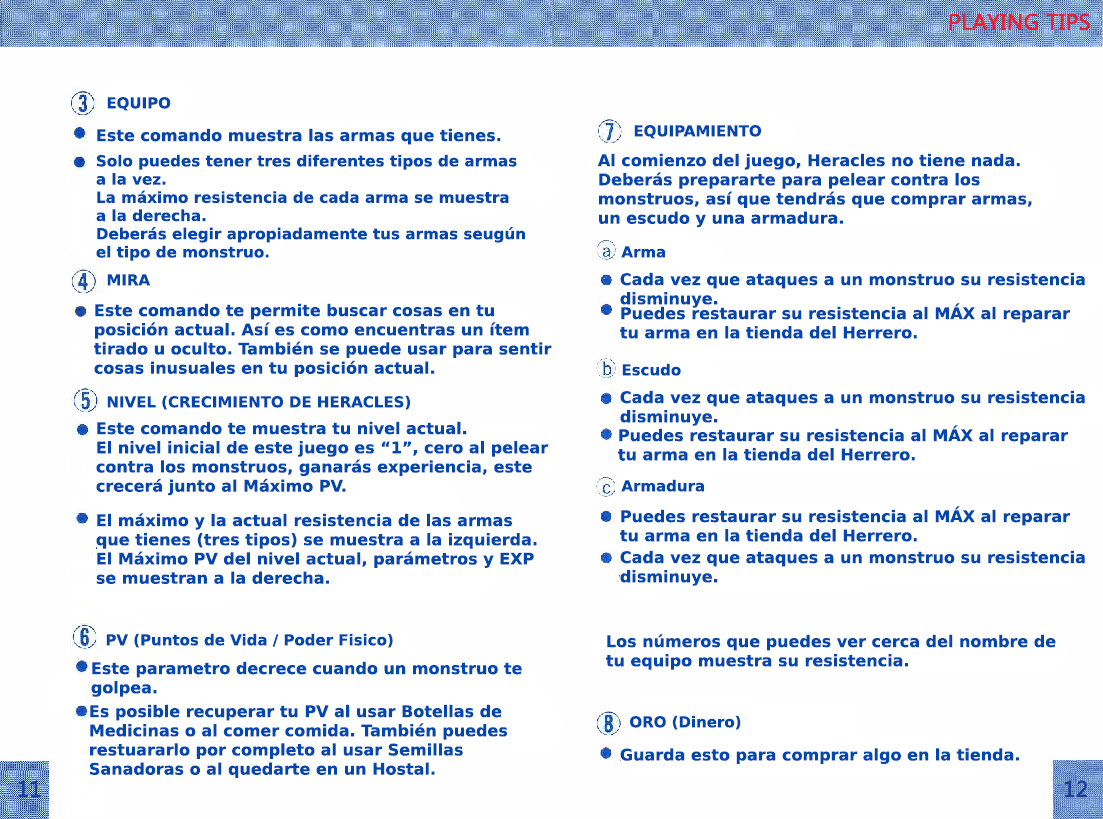
<style>
.page{position:relative;width:1103px;height:819px;background:#ffffff}
.page>*{position:absolute;margin:0}
.t1{font:15px "PrimaSansBT-Bold";color:#0247af}
.t2{font:16px "PrimaSansBT-Bold";color:#0247af}
.t3{font:15.2px "PrimaSansBT-Bold";color:#0247af}
</style>
<div class="page">
<p class="t1" style="left:107px;top:97px;width:64px;height:14px">EQUIPO</p>
<p class="t1" style="left:634px;top:125px;width:127px;height:14px">EQUIPAMIENTO</p>
<p class="t2" style="left:97px;top:128px;width:404px;height:17px">Este comando muestra las armas que tienes.</p>
<p class="t3" style="left:96px;top:154px;width:429px;height:107px">Solo puedes tener tres diferentes tipos de armas<br>a la vez.<br>La máximo resistencia de cada arma se muestra<br>a la derecha.<br>Deberás elegir apropiadamente tus armas seugún<br>el tipo de monstruo.</p>
<p class="t2" style="left:597px;top:153px;width:435px;height:75px">Al comienzo del juego, Heracles no tiene nada.<br>Deberás prepararte para pelear contra los monstruos, así que tendrás que comprar armas,<br>un escudo y una armadura.</p>
<p class="t1" style="left:621px;top:246px;width:44px;height:12px">Arma</p>
<p class="t1" style="left:107px;top:274px;width:43px;height:12px">MIRA</p>
<p class="t2" style="left:620px;top:272px;width:465px;height:36px">Cada vez que ataques a un monstruo su resistencia disminuye.</p>
<p class="t2" style="left:94px;top:303px;width:458px;height:74px">Este comando te permite buscar cosas en tu<br>posición actual. Así es como encuentras un ítem<br>tirado u oculto. También se puede usar para sentir<br>cosas inusuales en tu posición actual.</p>
<p class="t2" style="left:620px;top:303px;width:450px;height:36px">Puedes restaurar su resistencia al MÁX al reparar<br>tu arma en la tienda del Herrero.</p>
<p class="t1" style="left:622px;top:363px;width:59px;height:13px">Escudo</p>
<p class="t2" style="left:620px;top:390px;width:465px;height:36px">Cada vez que ataques a un monstruo su resistencia disminuye.</p>
<p class="t1" style="left:107px;top:395px;width:303px;height:15px">NIVEL (CRECIMIENTO DE HERACLES)</p>
<p class="t2" style="left:96px;top:421px;width:453px;height:75px">Este comando te muestra tu nivel actual.<br>El nivel inicial de este juego es “1”, cero al pelear<br>contra los monstruos, ganarás experiencia, este <br>crecerá junto al Máximo PV.</p>
<p class="t2" style="left:618px;top:425px;width:450px;height:36px">Puedes restaurar su resistencia al MÁX al reparar<br>tu arma en la tienda del Herrero.</p>
<p class="t1" style="left:621px;top:479px;width:83px;height:13px">Armadura</p>
<p class="t2" style="left:620px;top:506px;width:450px;height:36px">Puedes restaurar su resistencia al MÁX al reparar<br>tu arma en la tienda del Herrero.</p>
<p class="t2" style="left:96px;top:513px;width:441px;height:71px">El máximo y la actual resistencia de las armas<br>que tienes (tres tipos) se muestra a la izquierda.<br>El Máximo PV del nivel actual, parámetros y EXP<br>se muestran a la derecha.</p>
<p class="t2" style="left:620px;top:550px;width:465px;height:36px">Cada vez que ataques a un monstruo su resistencia disminuye.</p>
<p class="t1" style="left:106px;top:633px;width:287px;height:15px">PV (Puntos de Vida / Poder Fisico)</p>
<p class="t2" style="left:606px;top:634px;width:450px;height:36px">Los números que puedes ver cerca del nombre de<br>tu equipo muestra su resistencia.</p>
<p class="t2" style="left:91px;top:661px;width:431px;height:36px">Este parametro decrece cuando un monstruo te golpea.</p>
<p class="t2" style="left:90px;top:704px;width:418px;height:74px">Es posible recuperar tu PV al usar Botellas de Medicinas o al comer comida. También puedes<br>restuararlo por completo al usar Semillas Sanadoras o al quedarte en un Hostal.</p>
<p class="t1" style="left:630px;top:715px;width:111px;height:15px">ORO (Dinero)</p>
<p class="t2" style="left:620px;top:748px;width:399px;height:16px">Guarda esto para comprar algo en la tienda.</p>
</div>
